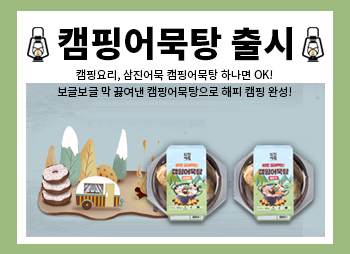
<style>
.page{position:relative;width:350px;height:254px;background:#ffffff}
.page>*{position:absolute;margin:0}
.t1{font:35.3px "NotoSansCJKkr-Black";color:#000000}
.t2{font:11.1px/16.8px "NotoSansKR-Regular";color:#000000}
</style>
<div class="page">
<p class="t1" style="left:57px;top:26px;width:235px;height:35px">캠핑어묵탕 출시</p>
<p class="t2" style="left:57px;top:69px;width:235px;height:29px;text-align:center">캠핑요리, 삼진어묵 캠핑어묵탕 하나면 OK!<br>보글보글 막 끓여낸 캠핑어묵탕으로 해피 캠핑 완성!</p>
</div>
